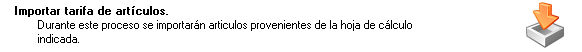
<style>
.page{position:relative;width:582px;height:52px;background:#ffffff}
.page>*{position:absolute;margin:0}
.t1{font:11.4px "MS Sans Serif";color:#000000;font-weight:bold}
.t2{font:11.4px "MS Sans Serif";color:#000000}
</style>
<div class="page">
<p class="t1" style="left:15px;top:6px;width:153px;height:11px">Importar tarifa de artículos.</p>
<p class="t2" style="left:38px;top:20px;width:374px;height:23px">Durante este proceso se importarán articulos provenientes de la hoja de cálculo <br>indicada.</p>
</div>
